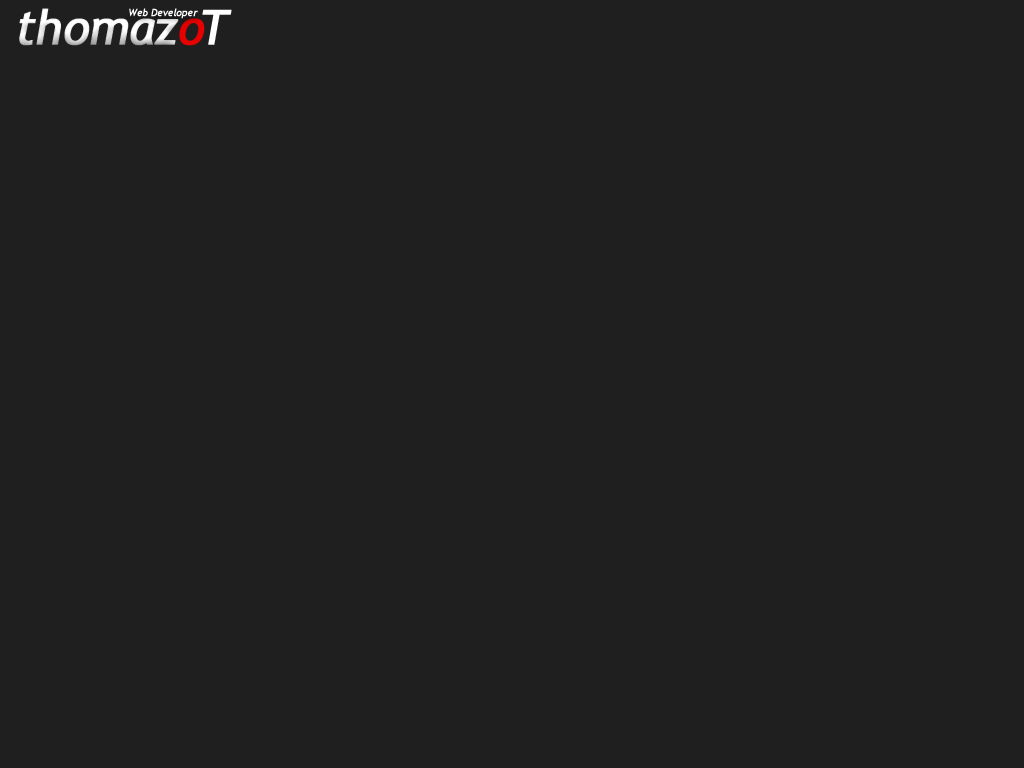
<style>
.page{position:relative;width:1024px;height:768px;background:#1f1f1f}
.page>*{position:absolute;margin:0}
.t1{font:48px "TrebuchetMS-Italic";letter-spacing:-0.02em;color:#eeeeee;font-weight:bold}
.t2{font:10px "TrebuchetMS-Italic";letter-spacing:-0.02em;color:#ffffff;font-weight:bold}
.t3{font:48px "TrebuchetMS-Italic";letter-spacing:-0.12em;color:#e60000;font-weight:bold}
.t4{font:48px "TrebuchetMS-Italic";letter-spacing:-0.12em;color:#ffffff;font-weight:bold}
</style>
<div class="page">
<p class="t1" style="left:19px;top:8px;width:160px;height:38px">thomaz</p>
<p class="t2" style="left:129px;top:8px;width:69px;height:11px">Web Developer</p>
<p class="t3" style="left:179px;top:9px;width:53px;height:37px">o<span class="t4">T</span></p>
</div>
